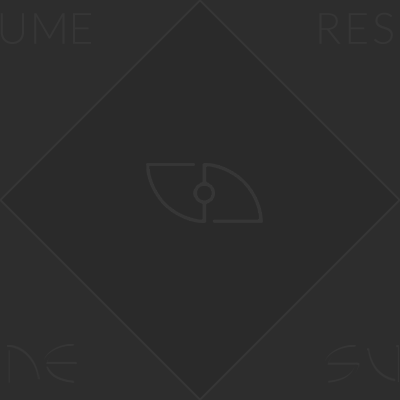
<style>
.page{position:relative;width:400px;height:400px;background:#2d2d2d}
.page>*{position:absolute;margin:0}
.t1{font:43.2px "Lato-Light";letter-spacing:-0.02em;color:#363636}
.t2{font:43.2px "Lato-Light";letter-spacing:0.04em;color:#363636}
.t3{font:43.2px "Lato-Light";letter-spacing:0.06em;color:#363636}
</style>
<div class="page">
<p class="t1" style="left:0px;top:13px;width:91px;height:31px"><span class="t2">     U</span>ME</p>
<p class="t3" style="left:319px;top:12px;width:74px;height:32px">RES</p>
</div>
